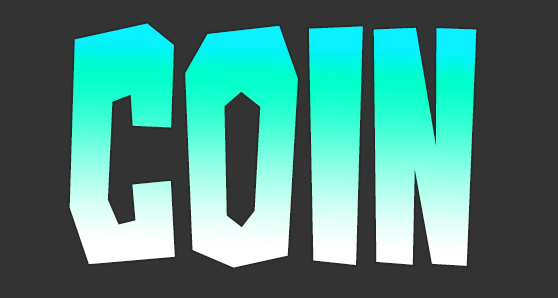
<style>
.page{position:relative;width:558px;height:298px;background:#333333}
.page>*{position:absolute;margin:0}
.t1{font:289.1px "Kaiju-Monster__G"}
</style>
<div class="page">
<p class="t1" style="left:69px;top:23px;width:408px;height:245px">Coin</p>
</div>
